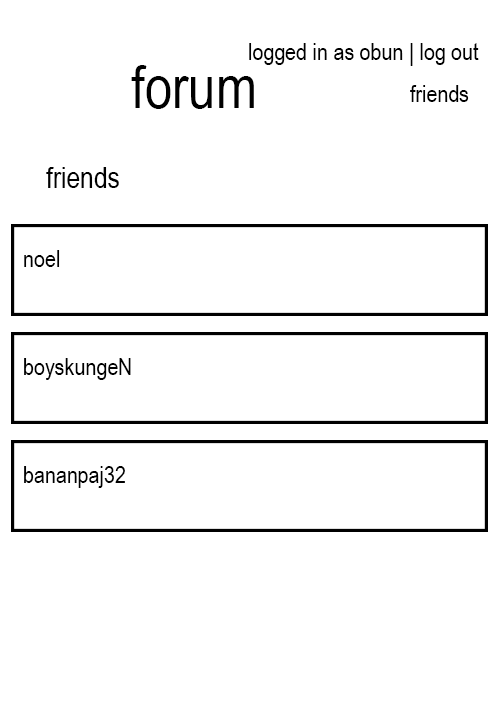
<style>
.page{position:relative;width:504px;height:728px;background:#ffffff}
.page>*{position:absolute;margin:0}
.t1{font:24px "ArialNarrow";color:#000000}
.t2{font:60px "ArialNarrow";color:#000000}
.t3{font:30px "ArialNarrow";color:#000000}
</style>
<div class="page">
<p class="t1" style="left:249px;top:43px;width:230px;height:23px">logged in as obun | log out</p>
<p class="t2" style="left:131px;top:65px;width:123px;height:44px">forum</p>
<p class="t1" style="left:410px;top:85px;width:59px;height:17px">friends</p>
<p class="t3" style="left:46px;top:167px;width:73px;height:21px">friends</p>
<p class="t1" style="left:24px;top:250px;width:36px;height:17px">noel</p>
<p class="t1" style="left:24px;top:358px;width:107px;height:22px">boyskungeN</p>
<p class="t1" style="left:24px;top:466px;width:101px;height:22px">bananpaj32</p>
</div>
